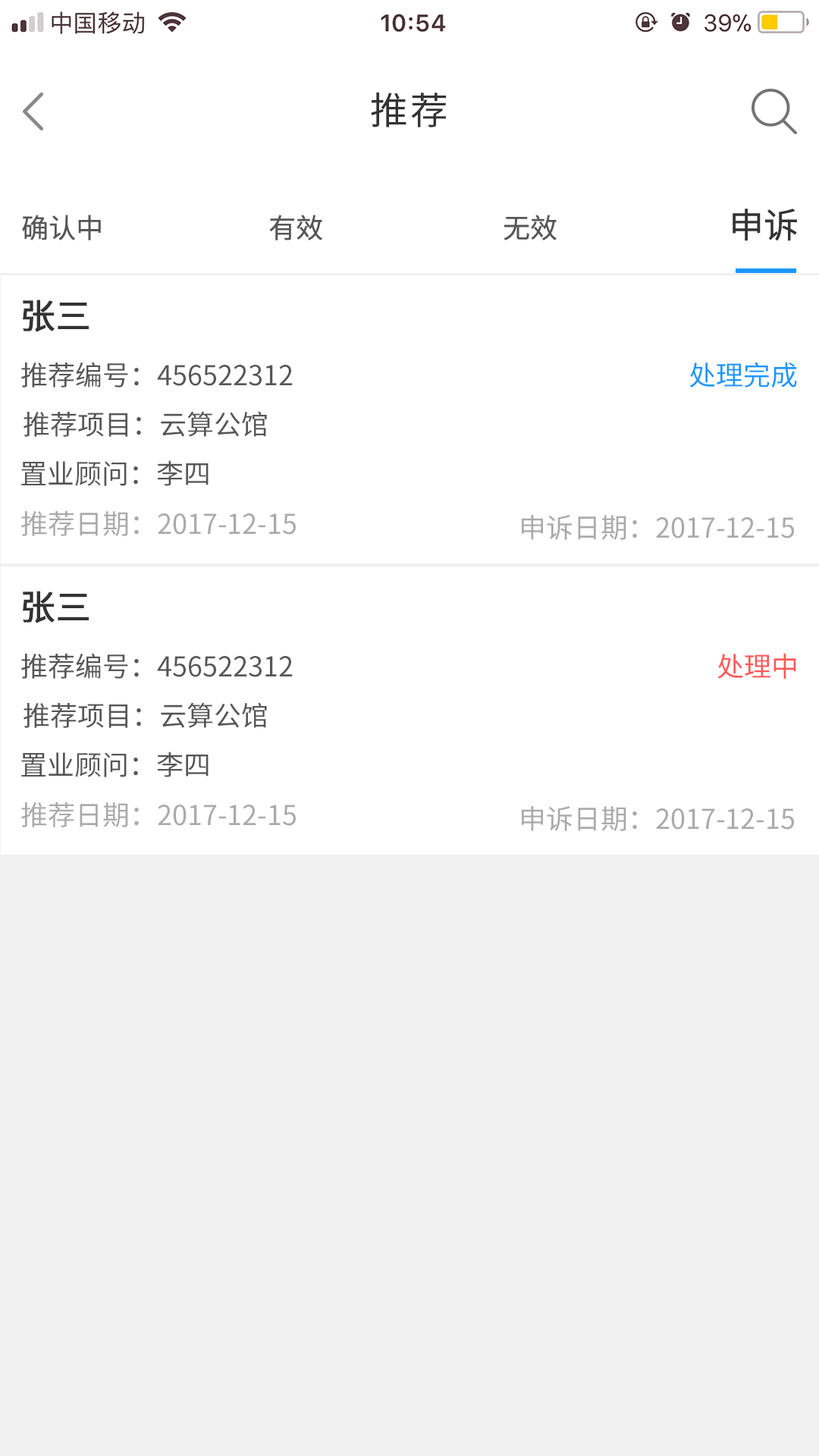
<style>
.page{position:relative;width:819px;height:1456px;background:#ffffff}
.page>*{position:absolute;margin:0}
.t1{font:37.9px "SourceHanSansCN-Regular";letter-spacing:0.06em;color:#333333}
.t2{font:34.9px "SourceHanSansCN-Regular";color:#333333}
.t3{font:27.3px "SourceHanSansCN-Regular";color:#565656}
.t4{font:34.9px "SourceHanSansCN-Regular";color:#333333;font-weight:bold}
.t5{font:27.3px "SourceHanSansCN-Regular";color:#1c97ff}
.t6{font:27.3px "SourceHanSansCN-Regular";color:#aaaaaa}
.t7{font:27.3px "SourceHanSansCN-Regular";color:#ff5858}
</style>
<div class="page">
<p class="t1" style="left:371px;top:93px;width:76px;height:34px">推荐</p>
<p class="t2" style="left:733px;top:209px;width:64px;height:32px">申诉</p>
<p class="t3" style="left:22px;top:215px;width:79px;height:25px">确认中</p>
<p class="t3" style="left:269px;top:215px;width:53px;height:25px">有效</p>
<p class="t3" style="left:504px;top:215px;width:53px;height:25px">无效</p>
<p class="t4" style="left:23px;top:300px;width:66px;height:32px">张三</p>
<p class="t3" style="left:21px;top:362px;width:272px;height:26px">推荐编号：456522312</p>
<p class="t5" style="left:689px;top:362px;width:108px;height:26px">处理完成</p>
<p class="t3" style="left:24px;top:411px;width:243px;height:26px">推荐项目：云算公馆</p>
<p class="t3" style="left:21px;top:460px;width:188px;height:26px">置业顾问：李四</p>
<p class="t6" style="left:21px;top:511px;width:275px;height:25px">推荐日期：2017-12-15</p>
<p class="t6" style="left:522px;top:515px;width:272px;height:25px">申诉日期：2017-12-15</p>
<p class="t4" style="left:23px;top:591px;width:66px;height:32px">张三</p>
<p class="t3" style="left:21px;top:653px;width:272px;height:26px">推荐编号：456522312</p>
<p class="t7" style="left:717px;top:653px;width:79px;height:26px">处理中</p>
<p class="t3" style="left:24px;top:702px;width:243px;height:26px">推荐项目：云算公馆</p>
<p class="t3" style="left:21px;top:751px;width:188px;height:26px">置业顾问：李四</p>
<p class="t6" style="left:21px;top:802px;width:275px;height:25px">推荐日期：2017-12-15</p>
<p class="t6" style="left:522px;top:806px;width:272px;height:25px">申诉日期：2017-12-15</p>
</div>
